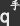
<style>
.page{position:relative;width:20px;height:26px;background:#333333}
.page>*{position:absolute;margin:0}
.t1{font:12px "DFKaiShu-SB-Estd-BF";color:#ececec;font-weight:bold}
.t2{font:18px "ArialMT";color:#ececec;font-weight:bold}
</style>
<div class="page">
<p class="t1" style="left:10px;top:0px;width:10px;height:11px">手</p>
<p class="t2" style="left:0px;top:12px;width:9px;height:15px">q</p>
</div>
